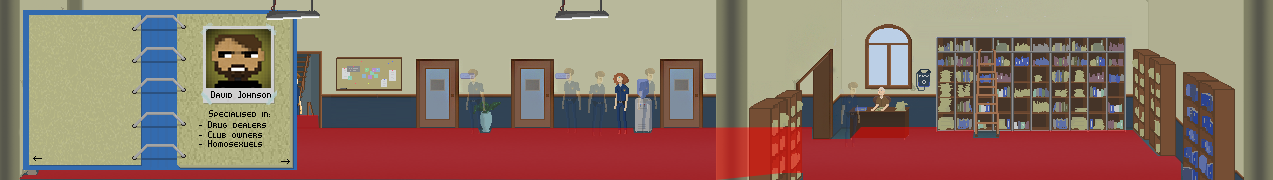
<style>
.page{position:relative;width:1273px;height:180px}
.page>*{position:absolute;margin:0}
.t1{font:16px "SomepxNew";color:#000000}
</style>
<div class="page">
<p class="t1" style="left:211px;top:91px;width:60px;height:7px">David Johnson</p>
<p class="t1" style="left:209px;top:110px;width:61px;height:7px">Specialised in:</p>
<p class="t1" style="left:199px;top:121px;width:67px;height:7px">- Drug dealers</p>
<p class="t1" style="left:199px;top:131px;width:63px;height:7px">- Club owners</p>
<p class="t1" style="left:199px;top:140px;width:63px;height:7px">- Homosexuels</p>
</div>
